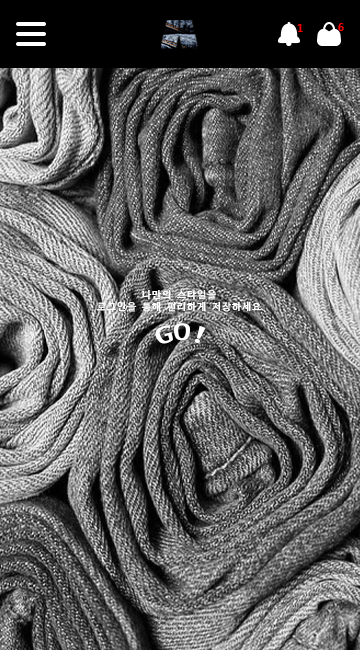
<style>
.page{position:relative;width:360px;height:650px}
.page>*{position:absolute;margin:0}
.t1{font:12px "D2CodingBold";color:#f60000}
.t2{font:10px/12px "D2CodingligatureBold";color:#ffffff}
.t3{font:24px "D2CodingBold";color:#ffffff}
</style>
<div class="page">
<p class="t1" style="left:297px;top:24px;width:6px;height:8px">1</p>
<p class="t1" style="left:338px;top:23px;width:6px;height:8px">6</p>
<p class="t2" style="left:96px;top:290px;width:165px;height:22px;text-align:center">나만의 스타일을<br>로그인을 통해 편리하게 저장하세요</p>
<p class="t3" style="left:155px;top:323px;width:51px;height:21px">GO!</p>
</div>
